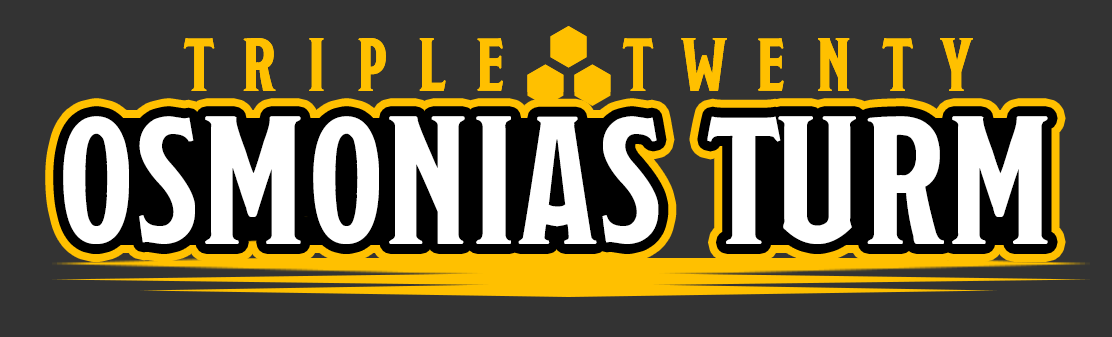
<style>
.page{position:relative;width:1112px;height:337px;background:#333333}
.page>*{position:absolute;margin:0}
.t1{font:182.3px "NodestoCapsCondensed";letter-spacing:-0.01em;color:#ffffff}
</style>
<div class="page">
<p class="t1" style="left:63px;top:116px;width:985px;height:128px">OSMONIAS TURM</p>
</div>
